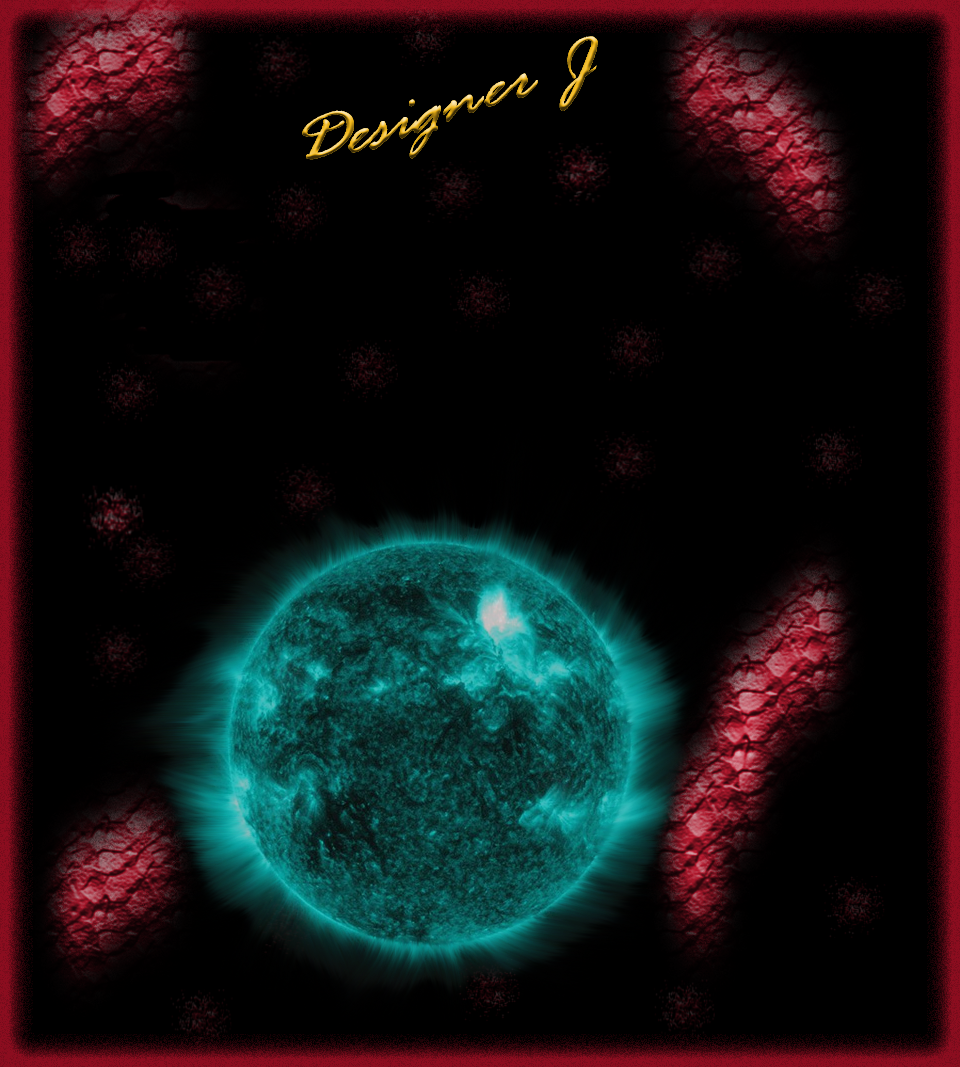
<style>
.page{position:relative;width:960px;height:1067px;background:#000000}
.page>*{position:absolute;margin:0}
.t1{font:76.8px "RageItalic"}
</style>
<div class="page">
<p class="t1" style="left:302px;top:36px;width:296px;height:124px">Designer J</p>
</div>
